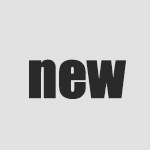
<style>
.page{position:relative;width:150px;height:150px;background:#e2e2e2}
.page>*{position:absolute;margin:0}
.t1{font:57.5px "Impact";letter-spacing:-0.025em;color:#2a2a2a;font-weight:bold}
</style>
<div class="page">
<p class="t1" style="left:29px;top:59px;width:97px;height:40px">new</p>
</div>
